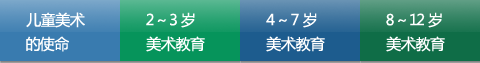
<style>
.page{position:relative;width:480px;height:63px}
.page>*{position:absolute;margin:0}
.t1{font:15px/24px "MicrosoftYaHei";color:#ffffff}
</style>
<div class="page">
<p class="t1" style="left:26px;top:12px;width:59px;height:40px">儿童美术<br>的使命</p>
<p class="t1" style="left:146px;top:12px;width:59px;height:40px">2 ~ 3 岁<br>美术教育</p>
<p class="t1" style="left:266px;top:12px;width:59px;height:40px">4 ~ 7 岁<br>美术教育</p>
<p class="t1" style="left:386px;top:12px;width:59px;height:40px">8 ~ 12 岁<br>美术教育</p>
</div>
